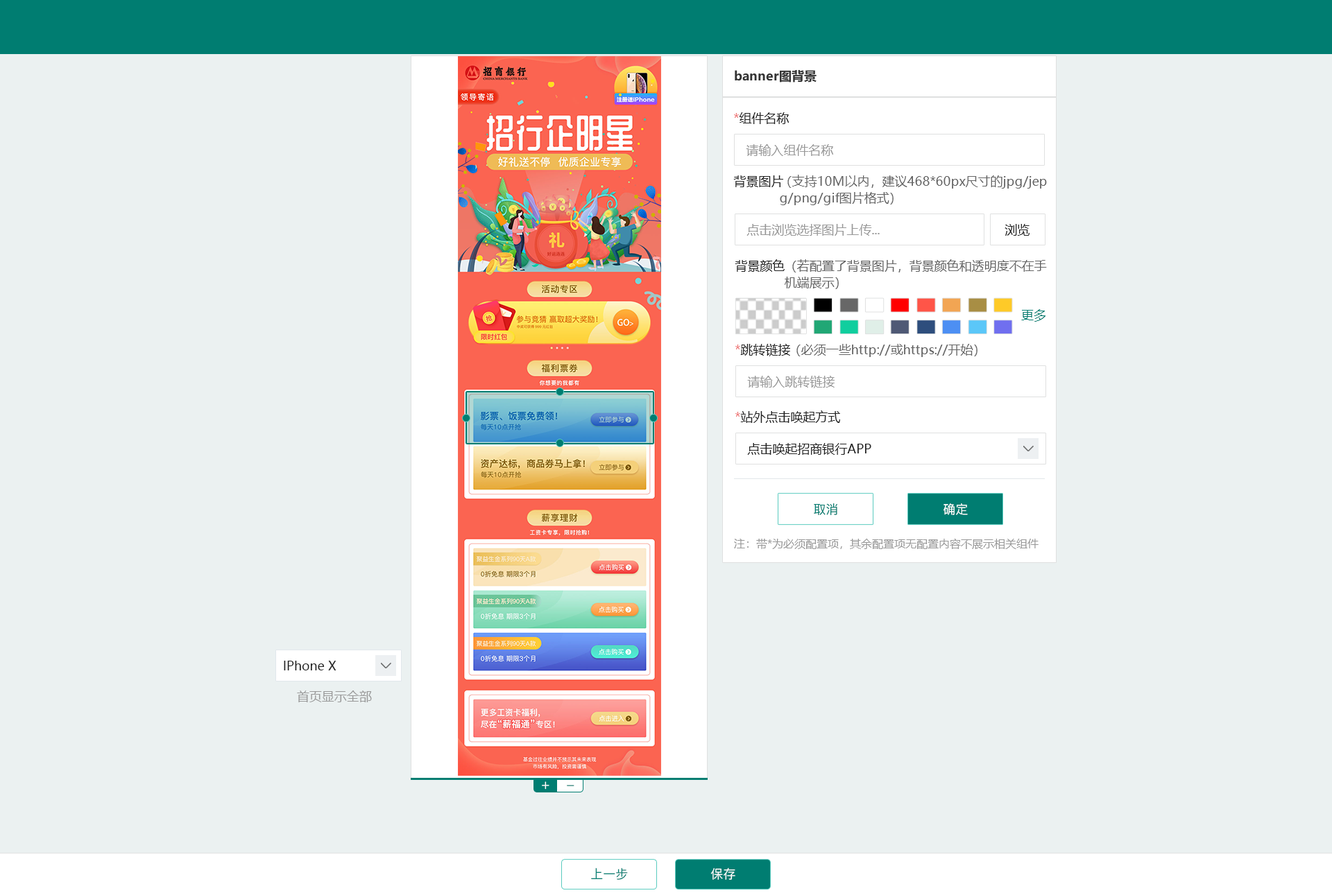
<style>
.page{position:relative;width:1332px;height:895px;background:#ebf1f1}
.page>*{position:absolute;margin:0}
.t1{font:12.5px "MicrosoftYaHei-Bold";color:#333333}
.t2{font:12.5px "MicrosoftYaHei";color:#222222}
.t3{font:12.5px "MicrosoftYaHei";color:#ee7575}
.t4{font:12.5px "MicrosoftYaHei";color:#999999}
.t5{font:12.5px/16.6px "MicrosoftYaHei";color:#666666}
.t6{font:12.5px "MicrosoftYaHei";color:#007d71}
.t7{font:12.5px "MicrosoftYaHei";color:#666666}
.t8{font:12.5px "PingFang-SC-Medium";color:#007d71}
.t9{font:12.5px "PingFang-SC-Medium";color:#ffffff}
.t10{font:11.1px "MicrosoftYaHei";color:#999999}
.t11{font:13.9px "PingFang-SC-Medium";color:#ffffff}
.t12{font:13.9px "PingFang-SC-Medium"}
</style>
<div class="page">
<p class="t1" style="left:735px;top:70px;width:81px;height:13px">banner图背景</p>
<p class="t2" style="left:734px;top:112px;width:55px;height:12px"><span class="t3">*</span>组件名称</p>
<p class="t4" style="left:746px;top:144px;width:87px;height:12px">请输入组件名称</p>
<p class="t2" style="left:733px;top:175px;width:50px;height:12px">背景图片</p>
<p class="t5" style="left:780px;top:175px;width:267px;height:30px">（支持10M以内，建议468*60px尺寸的jpg/jep<br>g/png/gif图片格式）</p>
<p class="t4" style="left:746px;top:224px;width:133px;height:12px">点击浏览选择图片上传...</p>
<p class="t2" style="left:1004px;top:224px;width:25px;height:12px">浏览</p>
<p class="t2" style="left:735px;top:259px;width:49px;height:13px">背景颜色</p>
<p class="t5" style="left:784px;top:259px;width:263px;height:30px">（若配置了背景图片，背景颜色和透明度不在手<br>机端展示）</p>
<p class="t6" style="left:1021px;top:309px;width:24px;height:13px">更多</p>
<p class="t2" style="left:735px;top:344px;width:55px;height:13px"><span class="t3">*</span>跳转链接</p>
<p class="t7" style="left:796px;top:344px;width:181px;height:13px">（必须一些http://或https://开始）</p>
<p class="t4" style="left:747px;top:376px;width:87px;height:12px">请输入跳转链接</p>
<p class="t2" style="left:735px;top:411px;width:105px;height:12px"><span class="t3">*</span>站外点击唤起方式</p>
<p class="t2" style="left:747px;top:443px;width:124px;height:12px">点击唤起招商银行APP</p>
<p class="t8" style="left:814px;top:504px;width:23px;height:11px">取消</p>
<p class="t9" style="left:943px;top:504px;width:25px;height:11px">确定</p>
<p class="t10" style="left:734px;top:539px;width:304px;height:10px">注：带*为必须配置项，其余配置项无配置内容不展示相关组件</p>
<p class="t2" style="left:284px;top:661px;width:52px;height:10px">IPhone X</p>
<p class="t4" style="left:297px;top:691px;width:75px;height:12px">首页显示全部</p>
<p class="t11" style="left:542px;top:782px;width:7px;height:8px">+</p>
<p class="t12" style="left:567px;top:785px;width:7px;height:2px">_</p>
<p class="t8" style="left:591px;top:868px;width:37px;height:12px">上一步</p>
<p class="t9" style="left:710px;top:868px;width:25px;height:12px">保存</p>
</div>
